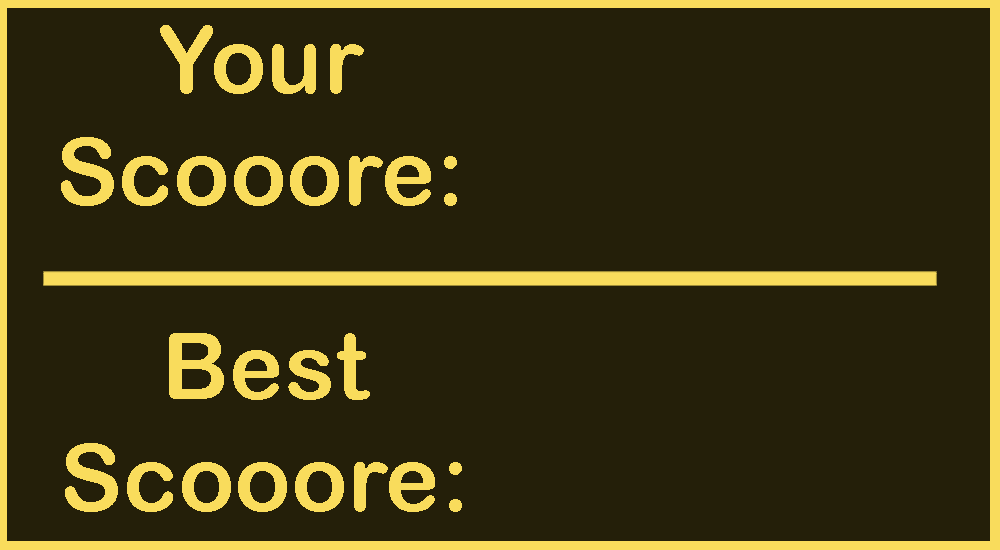
<style>
.page{position:relative;width:1000px;height:550px;background:#241f09}
.page>*{position:absolute;margin:0}
.t1{font:93.2px "ArialRoundedMTBold";color:#f9dc5c}
</style>
<div class="page">
<p class="t1" style="left:61px;top:25px;width:396px;height:181px;text-align:center">Your<br>Scooore:</p>
<p class="t1" style="left:65px;top:333px;width:397px;height:179px;text-align:center">Best<br>Scooore:</p>
</div>
